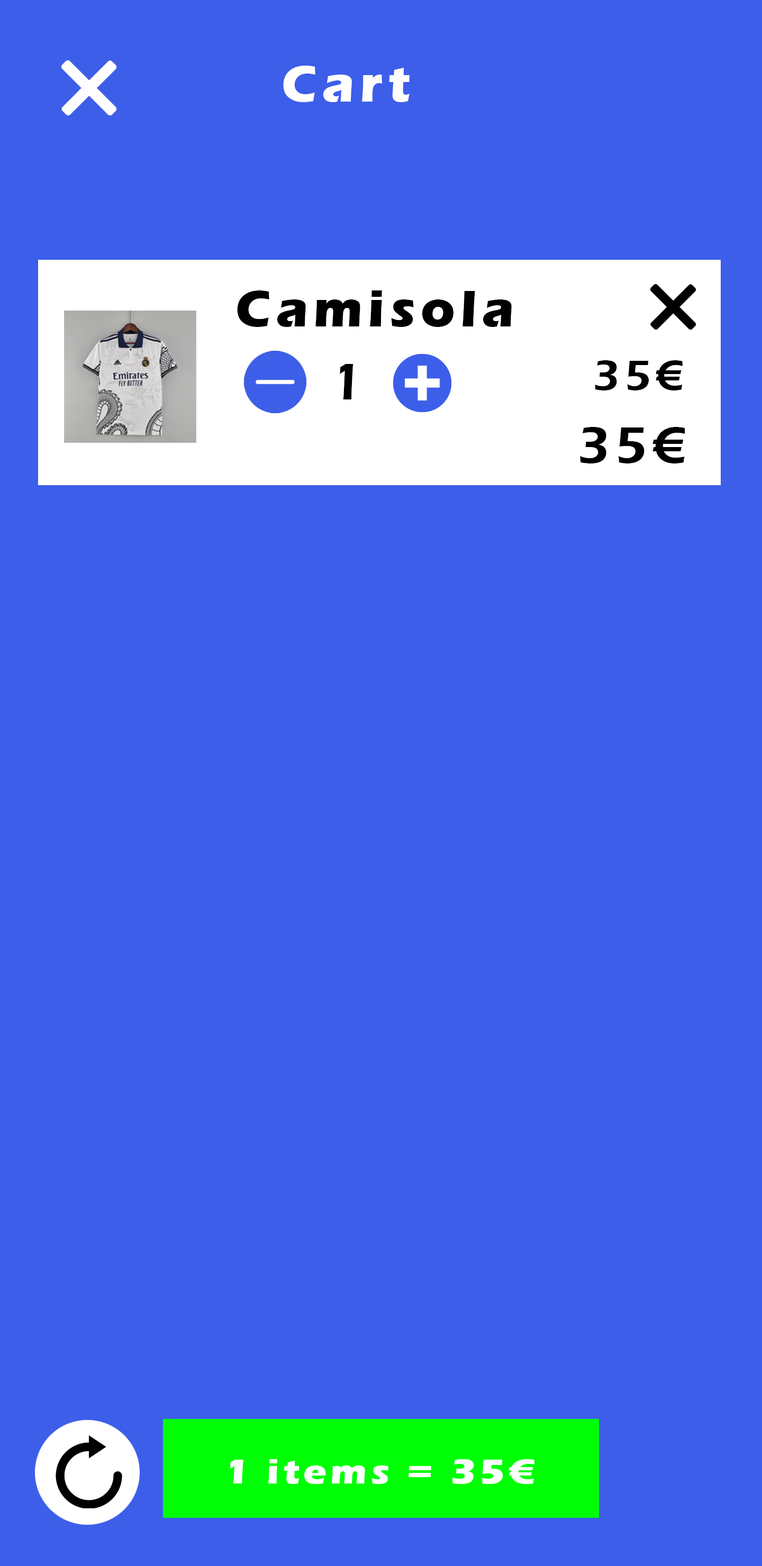
<style>
.page{position:relative;width:762px;height:1566px;background:#3d5ee9}
.page>*{position:absolute;margin:0}
.t1{font:52.9px "ErasITC-Bold";letter-spacing:0.1em;color:#ffffff}
.t2{font:52.9px "ErasITC-Bold";letter-spacing:0.1em;color:#000000}
.t3{font:52.9px "ErasITC-Demi";letter-spacing:0.1em;color:#000000}
.t4{font:44.1px "ErasITC-Demi";letter-spacing:0.1em;color:#000000}
.t5{font:35.3px "ErasITC-Bold";letter-spacing:0.1em;color:#ffffff;scale:1.11 1}
</style>
<div class="page">
<p class="t1" style="left:283px;top:66px;width:126px;height:36px">Cart</p>
<p class="t2" style="left:237px;top:290px;width:274px;height:37px">Camisola</p>
<p class="t3" style="left:340px;top:364px;width:13px;height:35px">1</p>
<p class="t4" style="left:595px;top:360px;width:87px;height:30px">35€</p>
<p class="t3" style="left:580px;top:427px;width:105px;height:36px">35€</p>
<p class="t5" style="left:230px;top:1459px;width:304px;height:25px">1 items = 35€</p>
</div>
